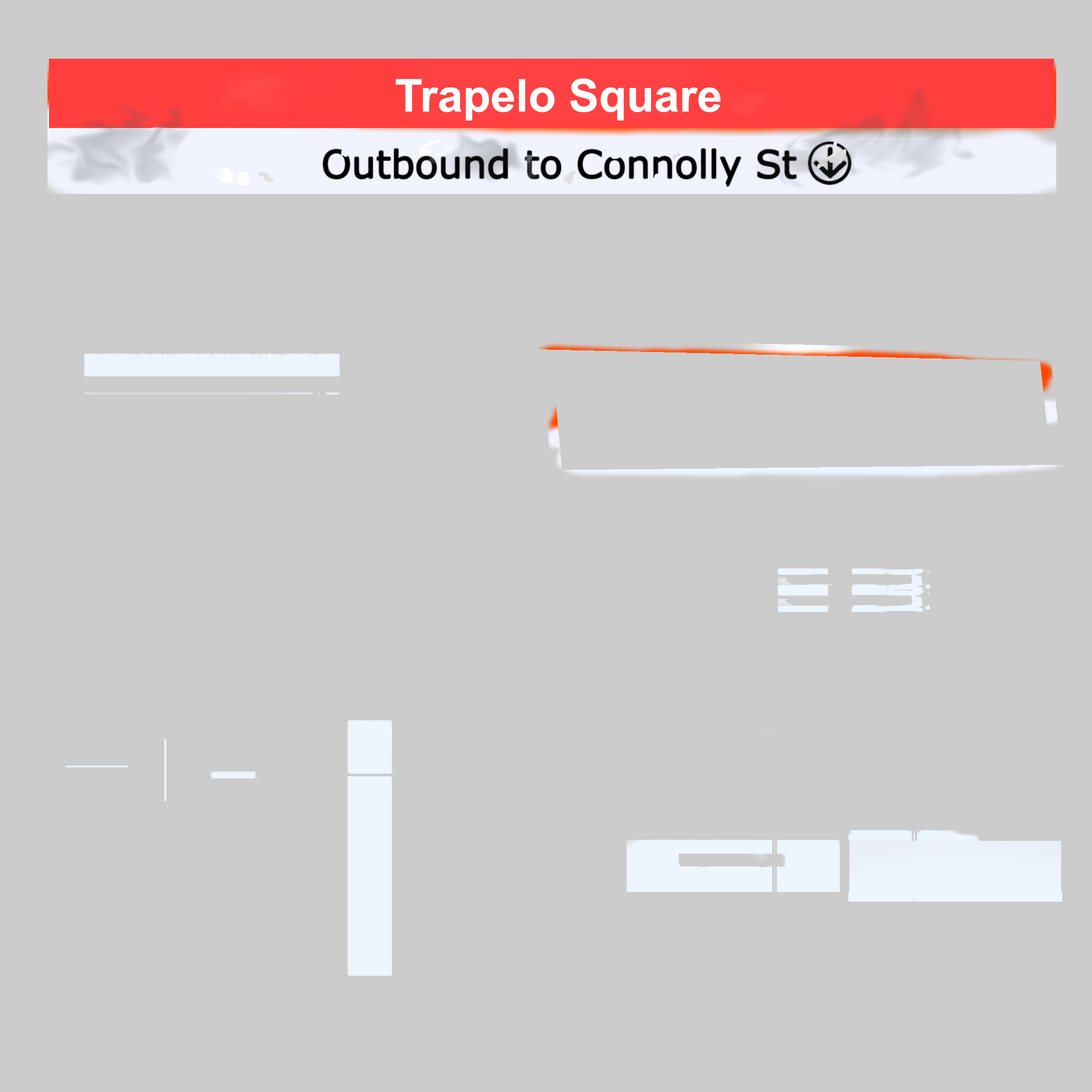
<style>
.page{position:relative;width:1092px;height:1092px;background:#cccccc}
.page>*{position:absolute;margin:0}
.t1{font:45.3px "Arial-BoldMT";color:#ffffff}
.t2{font:38.4px "MSReferenceSansSerif";color:#000000}
</style>
<div class="page">
<p class="t1" style="left:396px;top:78px;width:325px;height:43px">Trapelo Square</p>
<p class="t2" style="left:323px;top:149px;width:473px;height:37px">Outbound to Connolly St</p>
</div>
